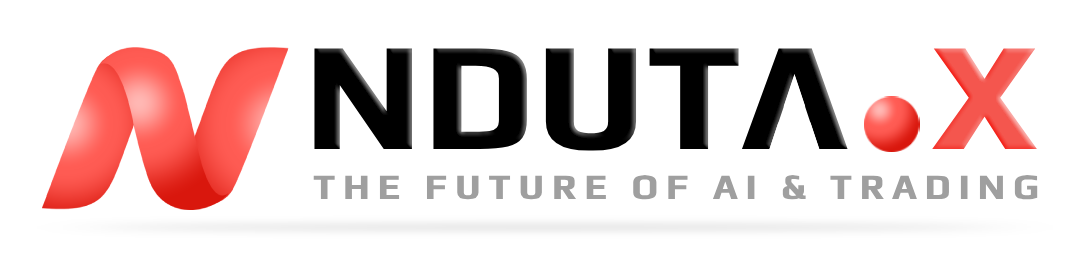
<style>
.page{position:relative;width:1086px;height:261px;background:#ffffff}
.page>*{position:absolute;margin:0}
.t1{font:36px "Play-Bold";letter-spacing:0.206em;color:#9f9f9f;text-transform:uppercase;font-weight:bold}
</style>
<div class="page">
<p class="t1" style="left:313px;top:175px;width:725px;height:25px">THE FUTURE OF AI &amp; TRADING</p>
</div>
